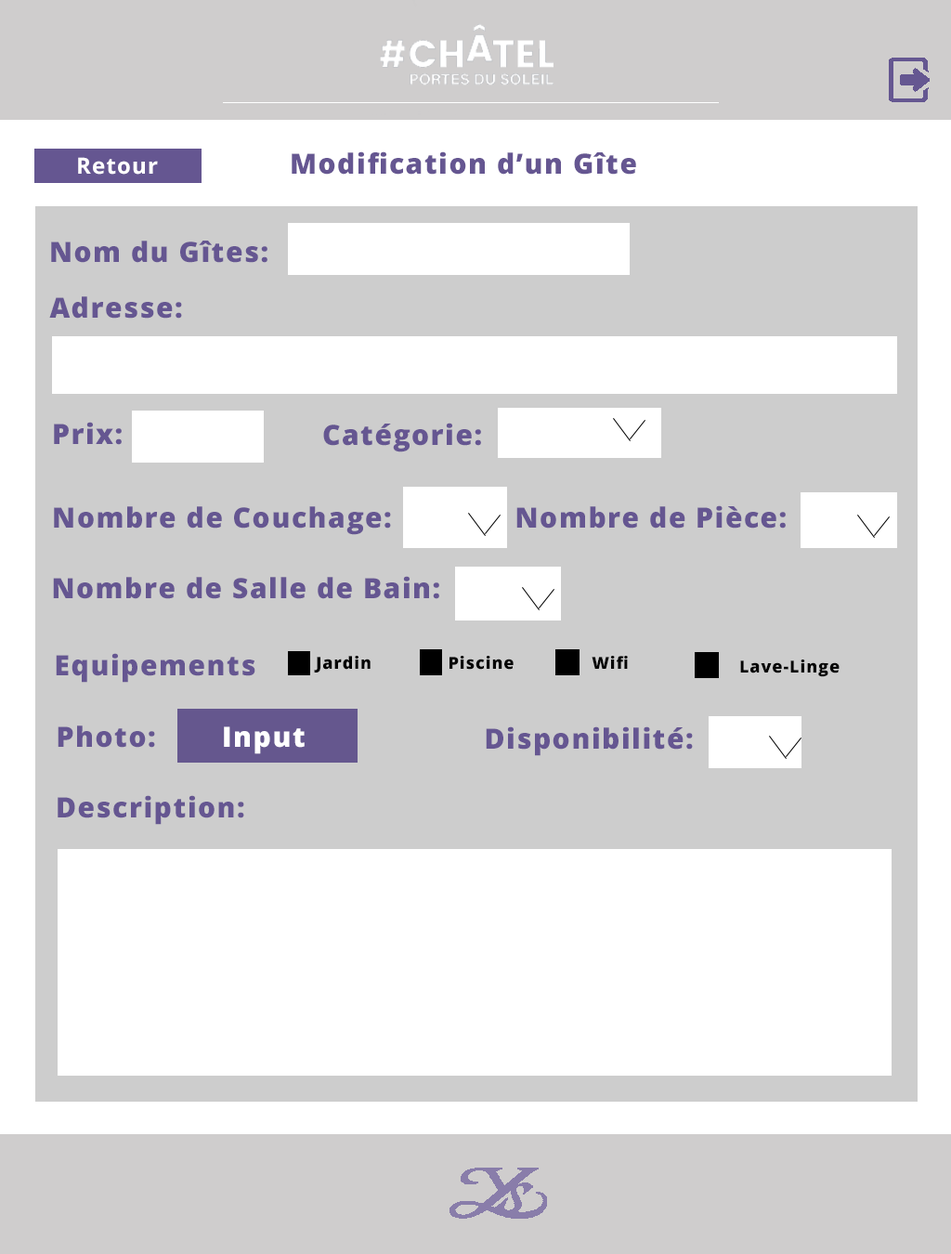
<style>
.page{position:relative;width:951px;height:1254px;background:#ffffff}
.page>*{position:absolute;margin:0}
.t1{font:22.3px "OpenSans-Bold";letter-spacing:0.05em;color:#ffffff}
.t2{font:27.9px "OpenSans-Extrabold";letter-spacing:0.05em;color:#655691}
.t3{font:16.7px "OpenSans-Extrabold";letter-spacing:0.05em;color:#000000}
.t4{font:16.7px "OpenSans-Extrabold";letter-spacing:0.05em;color:#040404}
.t5{font:27.9px "OpenSans-Extrabold";letter-spacing:0.05em;color:#ffffff}
</style>
<div class="page">
<p class="t1" style="left:78px;top:157px;width:80px;height:18px">Retour</p>
<p class="t2" style="left:292px;top:151px;width:344px;height:24px">Modification d’un Gîte</p>
<p class="t2" style="left:51px;top:241px;width:216px;height:22px">Nom du Gîtes:</p>
<p class="t2" style="left:49px;top:296px;width:133px;height:23px">Adresse:</p>
<p class="t2" style="left:54px;top:422px;width:68px;height:23px">Prix:</p>
<p class="t2" style="left:323px;top:423px;width:158px;height:29px">Catégorie:</p>
<p class="t2" style="left:54px;top:506px;width:337px;height:29px">Nombre de Couchage:</p>
<p class="t2" style="left:516px;top:505px;width:270px;height:23px">Nombre de Pièce:</p>
<p class="t2" style="left:53px;top:576px;width:386px;height:23px">Nombre de Salle de Bain:</p>
<p class="t2" style="left:56px;top:653px;width:199px;height:30px">Equipements</p>
<p class="t3" style="left:314px;top:656px;width:57px;height:16px">Jardin</p>
<p class="t4" style="left:450px;top:656px;width:64px;height:14px">Piscine</p>
<p class="t4" style="left:592px;top:656px;width:36px;height:13px">Wifi</p>
<p class="t4" style="left:740px;top:659px;width:100px;height:18px">Lave-Linge</p>
<p class="t2" style="left:58px;top:725px;width:97px;height:23px">Photo:</p>
<p class="t5" style="left:224px;top:726px;width:81px;height:28px">Input</p>
<p class="t2" style="left:486px;top:726px;width:207px;height:30px">Disponibilité:</p>
<p class="t2" style="left:58px;top:795px;width:186px;height:30px">Description:</p>
</div>
